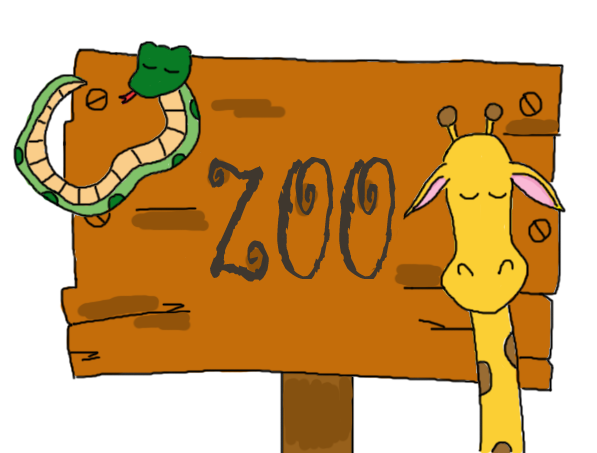
<style>
.page{position:relative;width:597px;height:453px;background:#c46d0a}
.page>*{position:absolute;margin:0}
.t1{font:172.5px "Gigi-Regular";color:#323232;scale:0.65 1}
</style>
<div class="page">
<p class="t1" style="left:208px;top:157px;width:188px;height:125px;opacity:0.91">ZOO</p>
</div>
